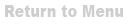
<style>
.page{position:relative;width:128px;height:24px;background:#ffffff}
.page>*{position:absolute;margin:0}
.t1{font:17.1px "Arial-Black";color:#cecece;scale:0.84 1}
</style>
<div class="page">
<p class="t1" style="left:5px;top:5px;width:118px;height:12px">Return to Menu</p>
</div>
